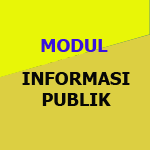
<style>
.page{position:relative;width:150px;height:150px;background:#dccf42}
.page>*{position:absolute;margin:0}
.t1{font:18px "Tahoma-Bold";color:#3912df}
.t2{font:18px "Tahoma-Bold";color:#070706}
</style>
<div class="page">
<p class="t1" style="left:41px;top:39px;width:67px;height:13px">MODUL</p>
<p class="t2" style="left:22px;top:72px;width:108px;height:34px;text-align:center">INFORMASI<br>PUBLIK</p>
</div>
